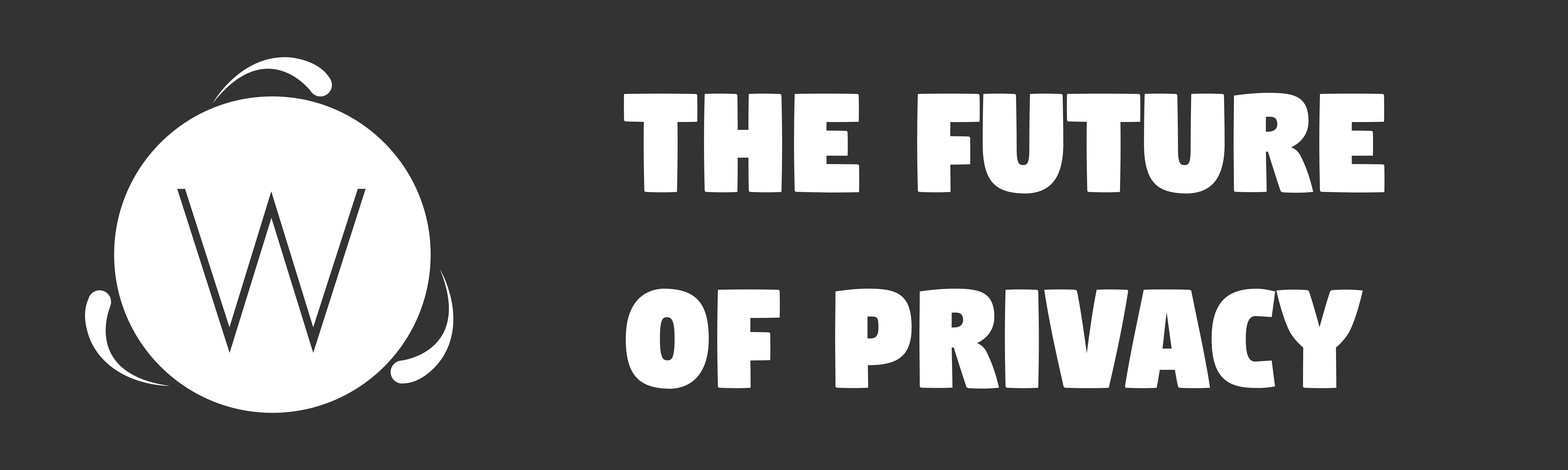
<style>
.page{position:relative;width:1568px;height:470px;background:#333333}
.page>*{position:absolute;margin:0}
.t1{font:163.3px "Digitalt";color:#ffffff}
</style>
<div class="page">
<p class="t1" style="left:624px;top:93px;width:761px;height:296px">The Future of Privacy</p>
</div>
